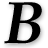
<style>
.page{position:relative;width:48px;height:48px;background:#000000}
.page>*{position:absolute;margin:0}
.t1{font:60px "BookAntiqua-BoldItalic";color:#000000}
</style>
<div class="page">
<p class="t1" style="left:4px;top:2px;width:38px;height:42px">B</p>
</div>
